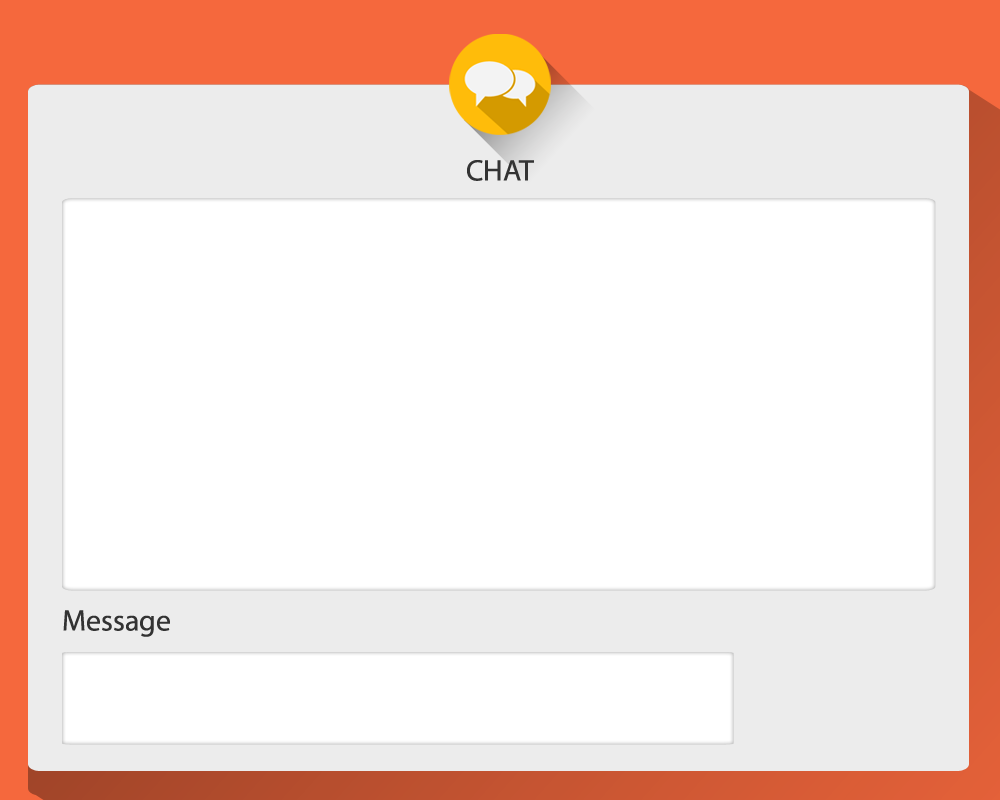
<style>
.page{position:relative;width:1000px;height:800px;background:#ffffff}
.page>*{position:absolute;margin:0}
.t1{font:29.8px "MyriadPro-Regular";color:#333333}
</style>
<div class="page">
<p class="t1" style="left:467px;top:160px;width:67px;height:21px">CHAT</p>
<p class="t1" style="left:63px;top:610px;width:107px;height:27px">Message</p>
</div>
